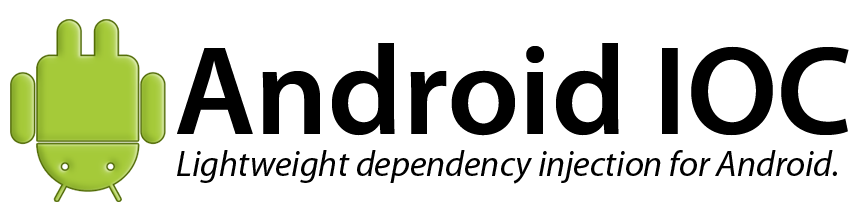
<style>
.page{position:relative;width:865px;height:224px;background:#ffffff}
.page>*{position:absolute;margin:0}
.t1{font:128px "MyriadPro-Semibold";color:#000000}
.t2{font:36px "MyriadPro-It";color:#000000}
</style>
<div class="page">
<p class="t1" style="left:177px;top:43px;width:672px;height:93px">Android IOC</p>
<p class="t2" style="left:177px;top:150px;width:660px;height:34px">Lightweight dependency injection for Android.</p>
</div>
